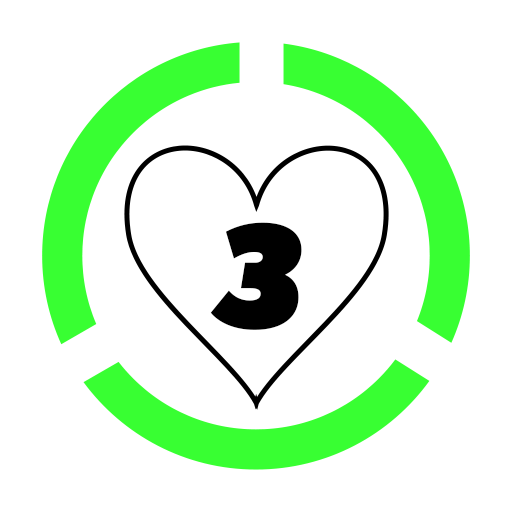
<style>
.page{position:relative;width:512px;height:512px;background:#ffffff}
.page>*{position:absolute;margin:0}
.t1{font:150px "Gibson-HeavyItalic";color:#000000}
</style>
<div class="page">
<p class="t1" style="left:210px;top:222px;width:92px;height:108px">3</p>
</div>
